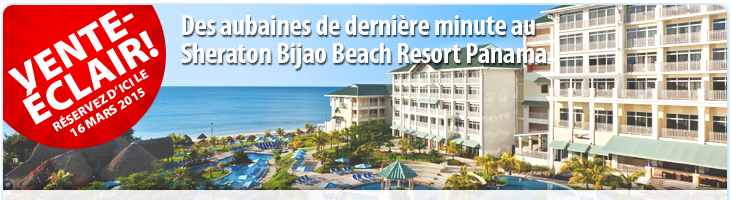
<style>
.page{position:relative;width:731px;height:200px}
.page>*{position:absolute;margin:0}
.t1{font:41px/33px "MyriadPro-Black";color:#ffffff;text-transform:uppercase}
.t2{font:29.4px/28.3px "MyriadPro-BoldCond";letter-spacing:-0.01em;color:#ffffff}
.t3{font:13px/14px "MyriadPro-Black";color:#ffffff;text-transform:uppercase}
</style>
<div class="page">
<p class="t1" style="left:7px;top:9px;width:152px;height:116px;text-align:center;rotate:-30deg">vente-<br>éclair!</p>
<p class="t2" style="left:181px;top:15px;width:366px;height:54px">Des aubaines de dernière minute au Sheraton Bijao Beach Resort Panama</p>
<p class="t3" style="left:52px;top:69px;width:97px;height:68px;text-align:center;rotate:-31deg">réservez d’ici le <br>16 mars 2015</p>
</div>
